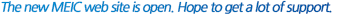
<style>
.page{position:relative;width:340px;height:15px;background:#ffffff}
.page>*{position:absolute;margin:0}
.t1{font:13px "NanumGothic";letter-spacing:-0.075em;color:#0078c2;font-weight:bold;font-style:italic}
</style>
<div class="page">
<p class="t1" style="left:1px;top:0px;width:331px;height:14px">The new MEIC web site is open. Hope to get a lot of support.</p>
</div>
